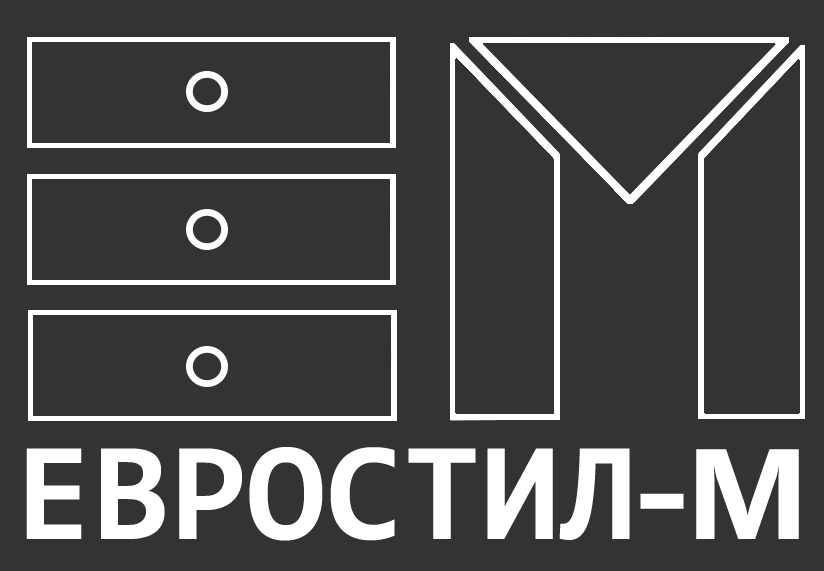
<style>
.page{position:relative;width:824px;height:571px;background:#333333}
.page>*{position:absolute;margin:0}
.t1{font:141.7px "Consolas-Bold";color:#ffffff}
.t2{font:141.7px "Consolas-Bold";letter-spacing:-0.1em;color:#ffffff}
.t3{font:128.3px "MicrosoftTaiLe-Bold";color:#ffffff}
</style>
<div class="page">
<p class="t1" style="left:26px;top:447px;width:773px;height:94px">ЕВРОСТИ<span class="t2">Л-</span><span class="t3">M</span></p>
</div>
